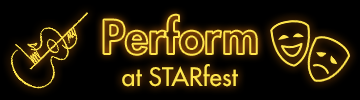
<style>
.page{position:relative;width:360px;height:100px;background:#000000}
.page>*{position:absolute;margin:0}
.t1{font:45.8px "FuturaStd-Heavy"}
.t2{font:25px "FuturaStd-Medium";color:#ffe64d}
</style>
<div class="page">
<p class="t1" style="left:103px;top:14px;width:154px;height:41px">Perform</p>
<p class="t2" style="left:122px;top:64px;width:116px;height:23px">at STARfest</p>
</div>
